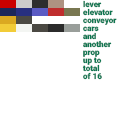
<style>
.page{position:relative;width:128px;height:128px;background:#ffffff}
.page>*{position:absolute;margin:0}
.t1{font:8px/8px "Roboto-Black";color:#0d7651}
</style>
<div class="page">
<p class="t1" style="left:82px;top:0px;width:35px;height:80px">lever<br>elevator<br>conveyor<br>cars<br>and <br>another<br>prop<br>up to <br>total<br>of 16</p>
</div>
